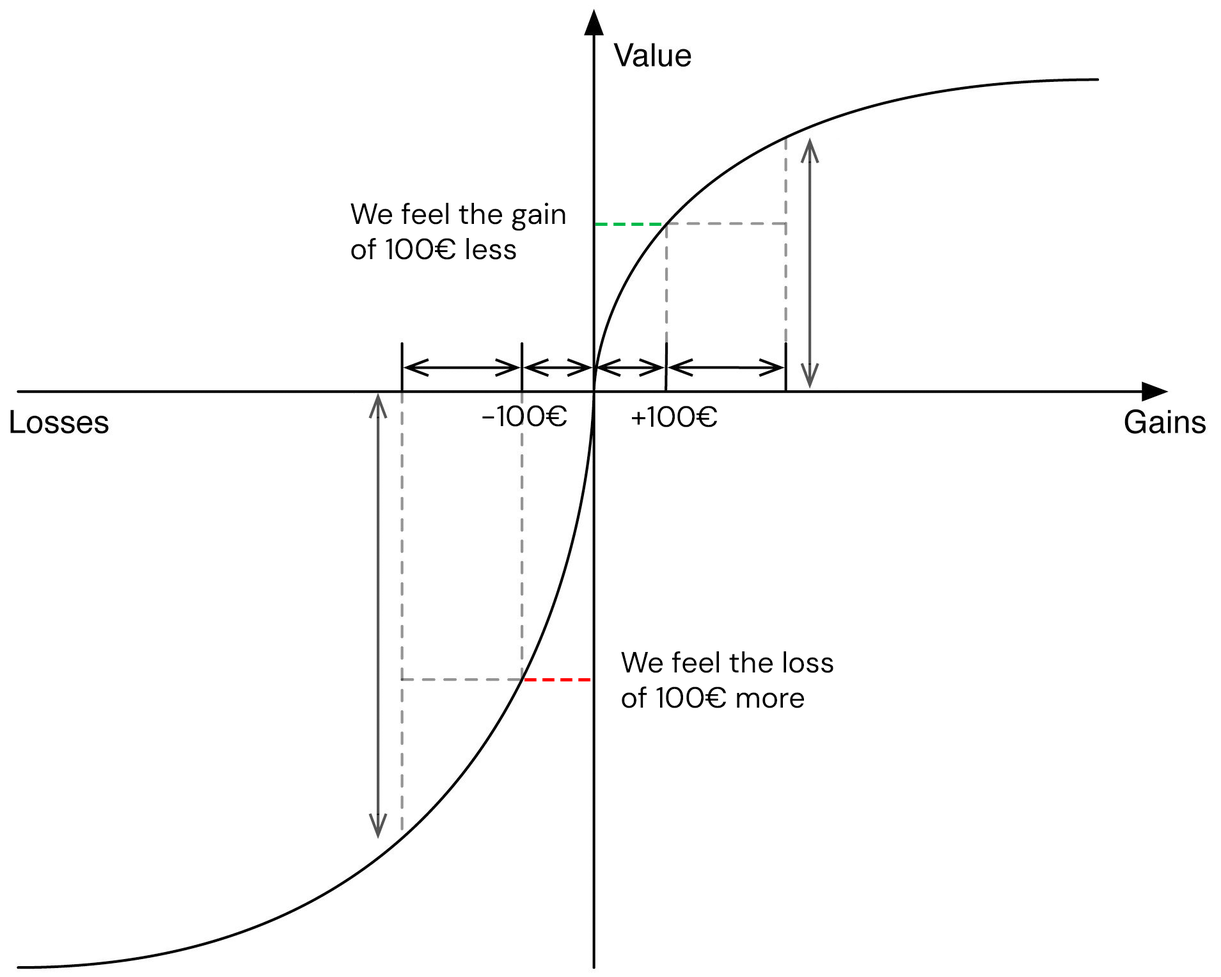
<style>
.page{position:relative;width:1221px;height:977px;background:#ffffff}
.page>*{position:absolute;margin:0}
.t1{font:29.3px "DMSans-Regular";color:#000000}
</style>
<div class="page">
<p class="t1" style="left:350px;top:202px;width:215px;height:58px">We feel the gain<br>of 100€ less</p>
<p class="t1" style="left:482px;top:405px;width:85px;height:22px">-100€</p>
<p class="t1" style="left:632px;top:405px;width:86px;height:22px">+100€</p>
<p class="t1" style="left:621px;top:651px;width:212px;height:57px">We feel the loss<br>of 100€ more</p>
</div>
